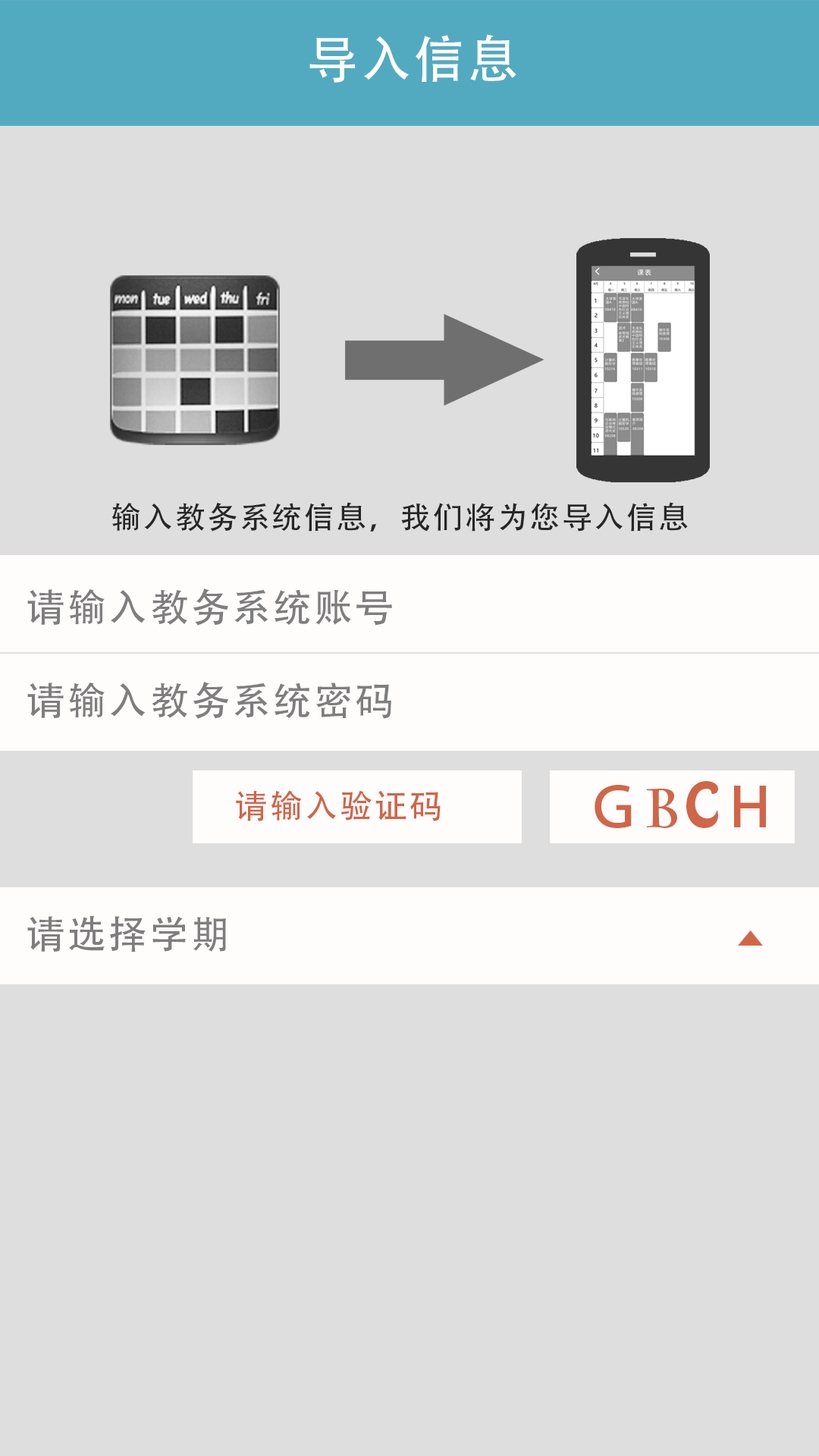
<style>
.page{position:relative;width:819px;height:1456px;background:#dedede}
.page>*{position:absolute;margin:0}
.t1{font:50.8px "AdobeHeitiStd-Regular";letter-spacing:0.06em;color:#ffffff}
.t2{font:30.4px "AdobeHeitiStd-Regular";letter-spacing:0.06em;color:#262626}
.t3{font:38.7px "AdobeHeitiStd-Regular";letter-spacing:0.06em;color:#7f7e7e}
.t4{font:54.6px "AdobeHeitiStd-Regular";letter-spacing:0.06em;color:#d16548}
.t5{font:54.6px "CharlemagneStd-Bold";letter-spacing:0.06em;color:#d16548}
.t6{font:54.6px "HoboStd";letter-spacing:0.06em;color:#d16548}
.t7{font:32.8px "AdobeHeitiStd-Regular";letter-spacing:0.06em;color:#d16548}
</style>
<div class="page">
<p class="t1" style="left:309px;top:34px;width:207px;height:49px">导入信息</p>
<p class="t2" style="left:111px;top:502px;width:577px;height:30px">输入教务系统信息，我们将为您导入信息</p>
<p class="t3" style="left:27px;top:588px;width:365px;height:38px">请输入教务系统账号</p>
<p class="t3" style="left:27px;top:682px;width:364px;height:37px">请输入教务系统密码</p>
<p class="t4" style="left:595px;top:781px;width:171px;height:47px">Ｇ<span class="t5">B</span><span class="t6">C</span>Ｈ</p>
<p class="t7" style="left:236px;top:790px;width:205px;height:31px">请输入验证码</p>
<p class="t3" style="left:27px;top:915px;width:199px;height:37px">请选择学期</p>
</div>
